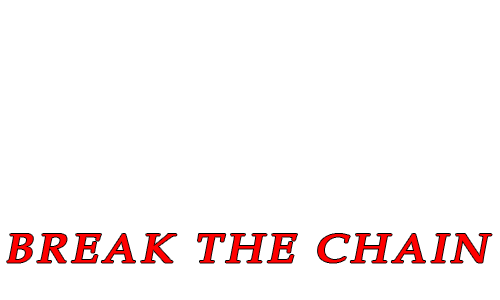
<style>
.page{position:relative;width:500px;height:300px;background:#ffffff}
.page>*{position:absolute;margin:0}
.t1{font:39.7px "BookAntiqua";letter-spacing:0.1em;color:#ff0000;font-weight:bold;font-style:italic;scale:1.08 1}
</style>
<div class="page">
<p class="t1" style="left:7px;top:234px;width:485px;height:29px">BREAK THE CHAIN</p>
</div>
